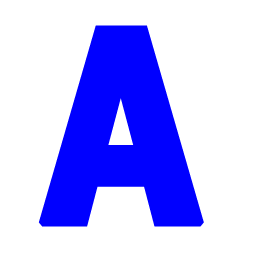
<style>
.page{position:relative;width:256px;height:256px;background:#ffffff}
.page>*{position:absolute;margin:0}
.t1{font:267.3px "Tahoma-Bold";color:#0000ff;text-transform:uppercase;font-weight:bold;scale:0.86 1}
</style>
<div class="page">
<p class="t1" style="left:38px;top:25px;width:166px;height:202px">A</p>
</div>
